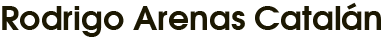
<style>
.page{position:relative;width:383px;height:39px;background:#ffffff}
.page>*{position:absolute;margin:0}
.t1{font:33px "Avalon-Bold";color:#1c1802}
</style>
<div class="page">
<p class="t1" style="left:2px;top:2px;width:379px;height:35px">Rodrigo Arenas Catalán</p>
</div>
